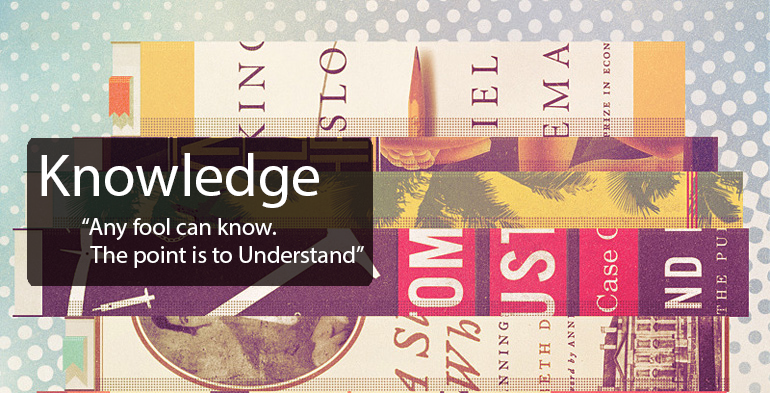
<style>
.page{position:relative;width:770px;height:393px}
.page>*{position:absolute;margin:0}
.t1{font:60px "MyriadPro-Regular";color:#ffffff}
.t2{font:24px "MyriadPro-Regular";color:#ffffff}
</style>
<div class="page">
<p class="t1" style="left:41px;top:153px;width:278px;height:55px">Knowledge</p>
<p class="t2" style="left:82px;top:218px;width:282px;height:50px">“Any fool can know. <br>  The point is to Understand”</p>
</div>
